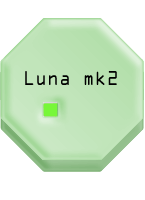
<style>
.page{position:relative;width:145px;height:200px;background:#ffffff}
.page>*{position:absolute;margin:0}
.t1{font:18px "OCRAStd";color:#000000;scale:0.92 1}
</style>
<div class="page">
<p class="t1" style="left:25px;top:71px;width:92px;height:14px">Luna mk2</p>
</div>
